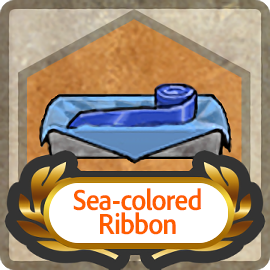
<style>
.page{position:relative;width:270px;height:270px}
.page>*{position:absolute;margin:0}
.t1{font:30px/24px "AdobeClean-Bold";letter-spacing:-0.04em;color:#ff5d00;scale:0.9 1}
</style>
<div class="page">
<p class="t1" style="left:73px;top:188px;width:128px;height:47px;text-align:center">Sea-colored<br>Ribbon</p>
</div>
